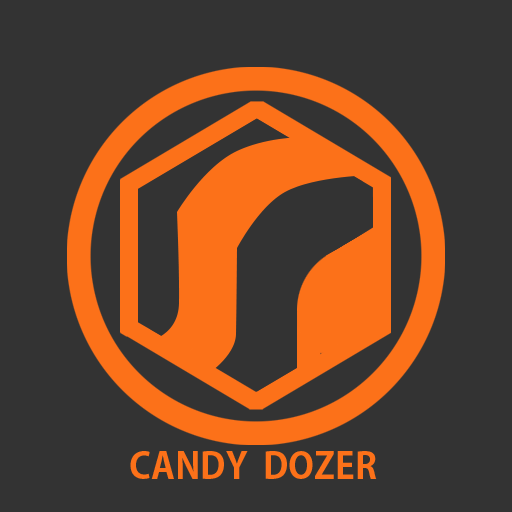
<style>
.page{position:relative;width:512px;height:512px;background:#333333}
.page>*{position:absolute;margin:0}
.t1{font:36px "KozGoPr6N-Bold";color:#fc7119}
</style>
<div class="page">
<p class="t1" style="left:130px;top:451px;width:247px;height:28px">CANDY  DOZER</p>
</div>
